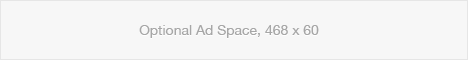
<style>
.page{position:relative;width:468px;height:60px;background:#f7f7f7}
.page>*{position:absolute;margin:0}
.t1{font:14px "HelveticaNeue";color:#a8a8a8}
</style>
<div class="page">
<p class="t1" style="left:139px;top:25px;width:180px;height:13px">Optional Ad Space, 468 x 60</p>
</div>
